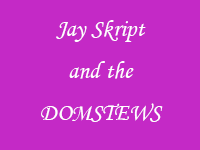
<style>
.page{position:relative;width:200px;height:150px;background:#c429c6}
.page>*{position:absolute;margin:0}
.t1{font:24px "STLiti";color:#ffffff}
</style>
<div class="page">
<p class="t1" style="left:41px;top:20px;width:122px;height:102px;text-align:center">Jay Skript  <br>and the <br>DOMSTEWS</p>
</div>
